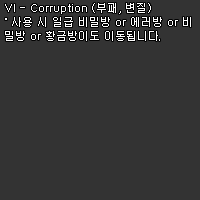
<style>
.page{position:relative;width:200px;height:200px;background:#333333}
.page>*{position:absolute;margin:0}
.t1{font:11px/14px "Dotum";color:#ffffff}
</style>
<div class="page">
<p class="t1" style="left:5px;top:3px;width:186px;height:38px">VI - Corruption (부패, 변질)<br>˚ 사용 시 일급 비밀방 or 에러방 or 비<br>밀방 or 황금방이도 이동됩니다.</p>
</div>
